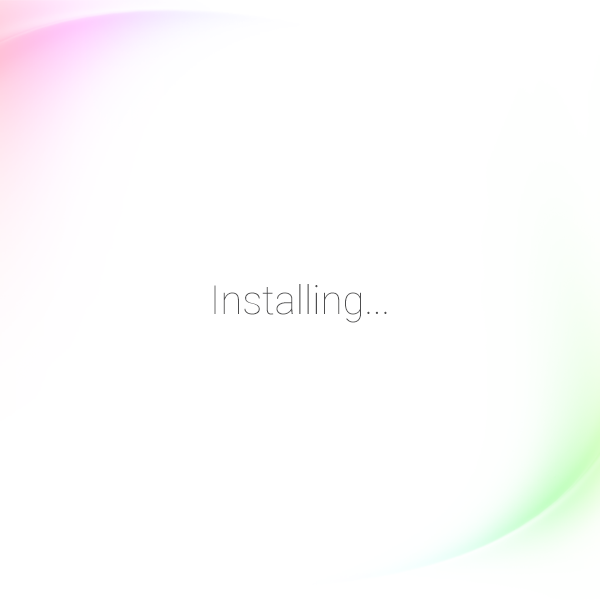
<style>
.page{position:relative;width:600px;height:600px;background:#ffffff}
.page>*{position:absolute;margin:0}
.t1{font:40px "Roboto-Thin";color:#4d4d4e}
</style>
<div class="page">
<p class="t1" style="left:214px;top:284px;width:173px;height:39px">Installing...</p>
</div>
